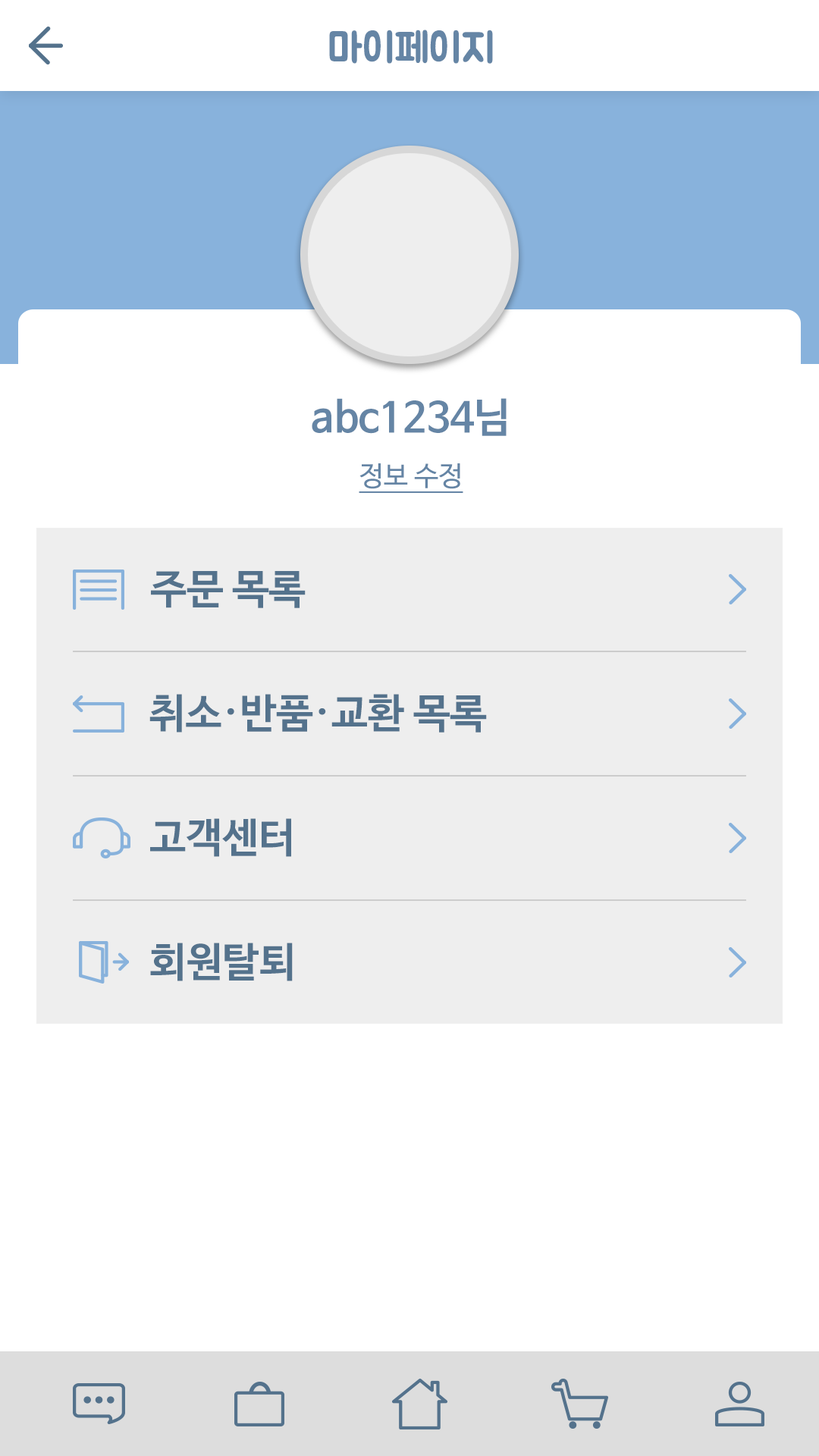
<style>
.page{position:relative;width:819px;height:1456px;background:#ffffff}
.page>*{position:absolute;margin:0}
.t1{font:40.9px "BMJUA";color:#6585a5}
.t2{font:40.9px "NanumBarunGothicBold";color:#6585a5}
.t3{font:27.3px "NanumBarunGothic";color:#6585a5;text-decoration:underline}
.t4{font:40.9px "NanumBarunGothicBold";color:#54728c}
</style>
<div class="page">
<p class="t1" style="left:329px;top:30px;width:164px;height:34px">마이페이지</p>
<p class="t2" style="left:312px;top:398px;width:195px;height:38px">abc1234님</p>
<p class="t3" style="left:359px;top:463px;width:104px;height:30px">정보 수정</p>
<p class="t4" style="left:151px;top:571px;width:155px;height:37px">주문 목록</p>
<p class="t4" style="left:149px;top:694px;width:338px;height:39px">취소·반품·교환 목록</p>
<p class="t4" style="left:150px;top:818px;width:141px;height:39px">고객센터</p>
<p class="t4" style="left:150px;top:943px;width:143px;height:38px">회원탈퇴</p>
</div>
